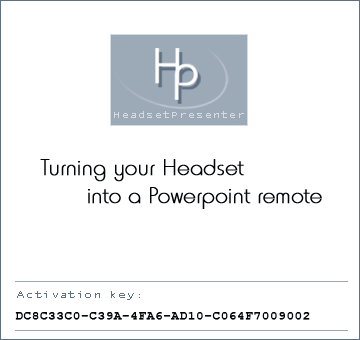
<style>
.page{position:relative;width:360px;height:340px;background:#ffffff}
.page>*{position:absolute;margin:0}
.t1{font:24px/28px "HoratioD-Ligh";color:#010407;font-weight:bold}
.t2{font:11.4px "CourierNewPSMT";letter-spacing:0.025em;color:#010407;font-weight:bold;scale:1.11 1}
</style>
<div class="page">
<p class="t1" style="left:40px;top:159px;width:282px;height:50px">Turning your Headset <br>       into a Powerpoint remote</p>
<p class="t2" style="left:15px;top:312px;width:295px;height:8px">DC8C33C0-C39A-4FA6-AD10-C064F7009002</p>
</div>
